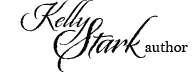
<style>
.page{position:relative;width:192px;height:73px;background:#ffffff}
.page>*{position:absolute;margin:0}
.t1{font:36px "Origins";color:#060606}
.t2{font:50px "Origins";color:#060606}
.t3{font:16px "BellMT";color:#060606}
</style>
<div class="page">
<p class="t1" style="left:20px;top:0px;width:73px;height:45px">Kelly</p>
<p class="t2" style="left:53px;top:15px;width:105px;height:57px">Stark</p>
<p class="t3" style="left:145px;top:41px;width:43px;height:11px">author</p>
</div>
